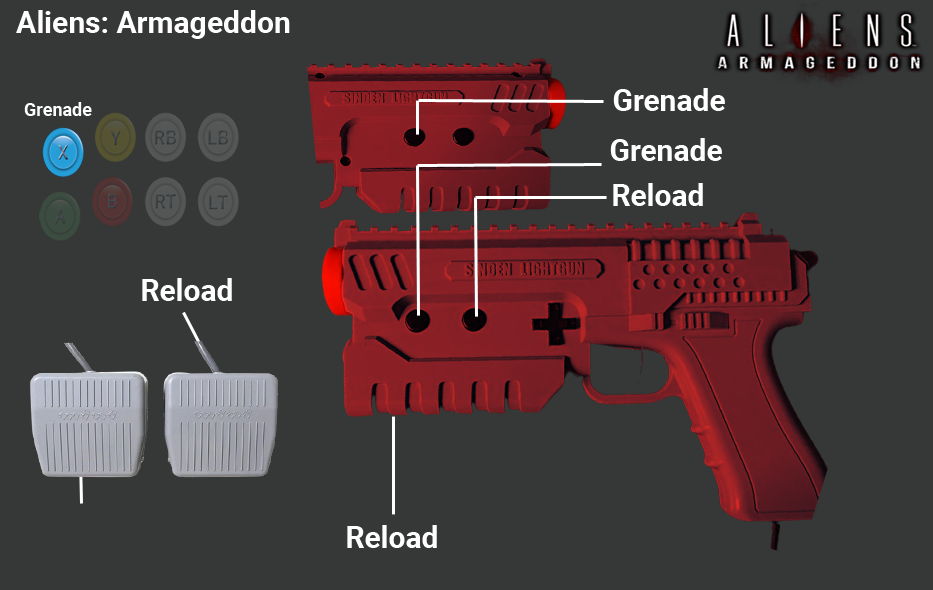
<style>
.page{position:relative;width:933px;height:590px;background:#363838}
.page>*{position:absolute;margin:0}
.t1{font:30px "Roboto-Bold";color:#ffffff}
.t2{font:18px "Roboto-Bold";color:#ffffff}
.t3{font:30px "Roboto-Bold";color:#fefefe}
</style>
<div class="page">
<p class="t1" style="left:16px;top:10px;width:274px;height:29px">Aliens: Armageddon</p>
<p class="t1" style="left:613px;top:88px;width:112px;height:23px">Grenade</p>
<p class="t2" style="left:24px;top:102px;width:68px;height:14px">Grenade</p>
<p class="t3" style="left:610px;top:138px;width:112px;height:23px">Grenade</p>
<p class="t1" style="left:613px;top:183px;width:90px;height:23px">Reload</p>
<p class="t1" style="left:142px;top:278px;width:90px;height:23px">Reload</p>
<p class="t1" style="left:347px;top:525px;width:90px;height:23px">Reload</p>
</div>
